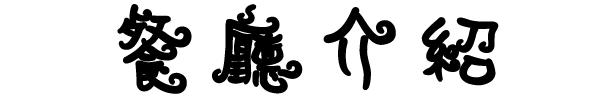
<style>
.page{position:relative;width:600px;height:100px;background:#ffffff}
.page>*{position:absolute;margin:0}
.t1{font:100px "DFMo-W4-WINP-BF";color:#000000;font-weight:bold}
</style>
<div class="page">
<p class="t1" style="left:117px;top:4px;width:382px;height:90px">餐廳介紹</p>
</div>
